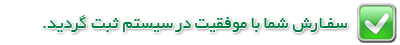
<style>
.page{position:relative;width:400px;height:45px;background:#ffffff}
.page>*{position:absolute;margin:0}
.t1{font:18.1px "BYekan";color:#007f3e}
</style>
<div class="page">
<p class="t1" style="left:43px;top:15px;width:305px;height:17px">سفـارش شما با موفقیت در سیستم ثبت گردید.</p>
</div>
